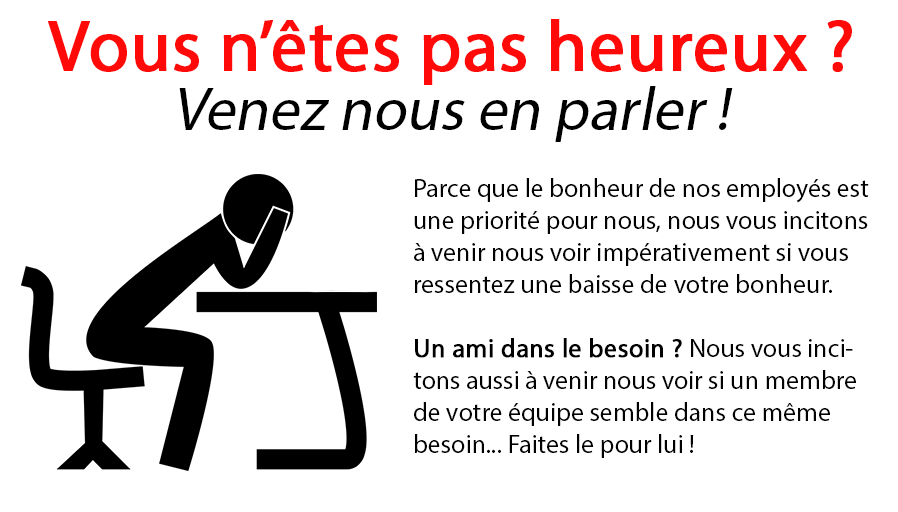
<style>
.page{position:relative;width:898px;height:512px;background:#ffffff}
.page>*{position:absolute;margin:0}
.t1{font:72px "MyriadPro-Regular";color:#ff0909;font-weight:bold}
.t2{font:61px "MyriadPro-Regular";color:#000000;font-style:italic}
.t3{font:26px/32px "MyriadPro-Regular";color:#010101}
.t4{font:26px/32px "MyriadPro-Regular";color:#010101;font-weight:bold}
</style>
<div class="page">
<p class="t1" style="left:48px;top:19px;width:804px;height:66px">Vous n’êtes pas heureux ?</p>
<p class="t2" style="left:179px;top:86px;width:554px;height:56px">Venez nous en parler !</p>
<p class="t3" style="left:413px;top:178px;width:456px;height:280px">Parce que le bonheur de nos employés est une priorité pour nous, nous vous incitons à venir nous voir impérativement si vous ressentez une baisse de votre bonheur. <br><span class="t4"><br>Un ami dans le besoin ? </span>Nous vous incitons aussi à venir nous voir si un membre de votre équipe semble dans ce même besoin... Faites le pour lui !</p>
</div>
